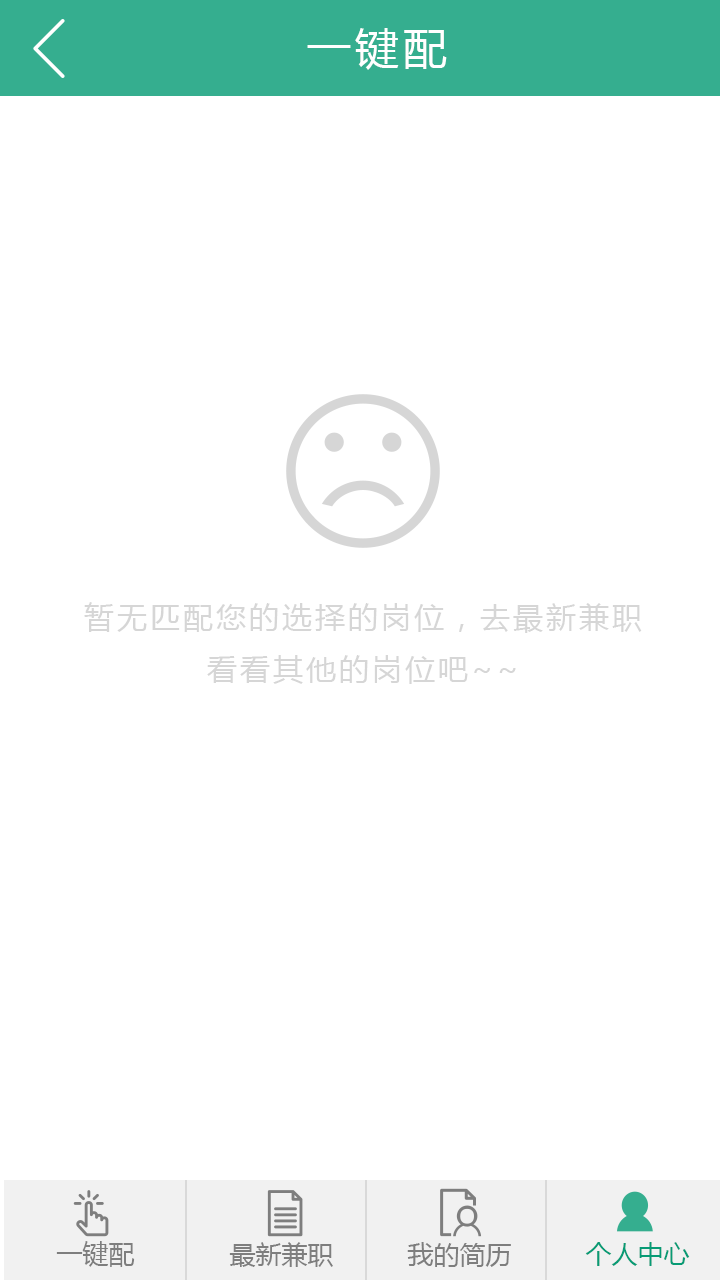
<style>
.page{position:relative;width:720px;height:1280px;background:#ffffff}
.page>*{position:absolute;margin:0}
.t1{font:44px "MicrosoftYaHei";letter-spacing:0.1em;color:#ffffff}
.t2{font:30px "MicrosoftYaHei";letter-spacing:0.1em;color:#d7d7d7}
</style>
<div class="page">
<p class="t1" style="left:307px;top:28px;width:140px;height:42px">一键配</p>
<p class="t2" style="left:84px;top:602px;width:558px;height:82px;text-align:center">暂无匹配您的选择的岗位，去最新兼职<br>看看其他的岗位吧~~</p>
</div>
